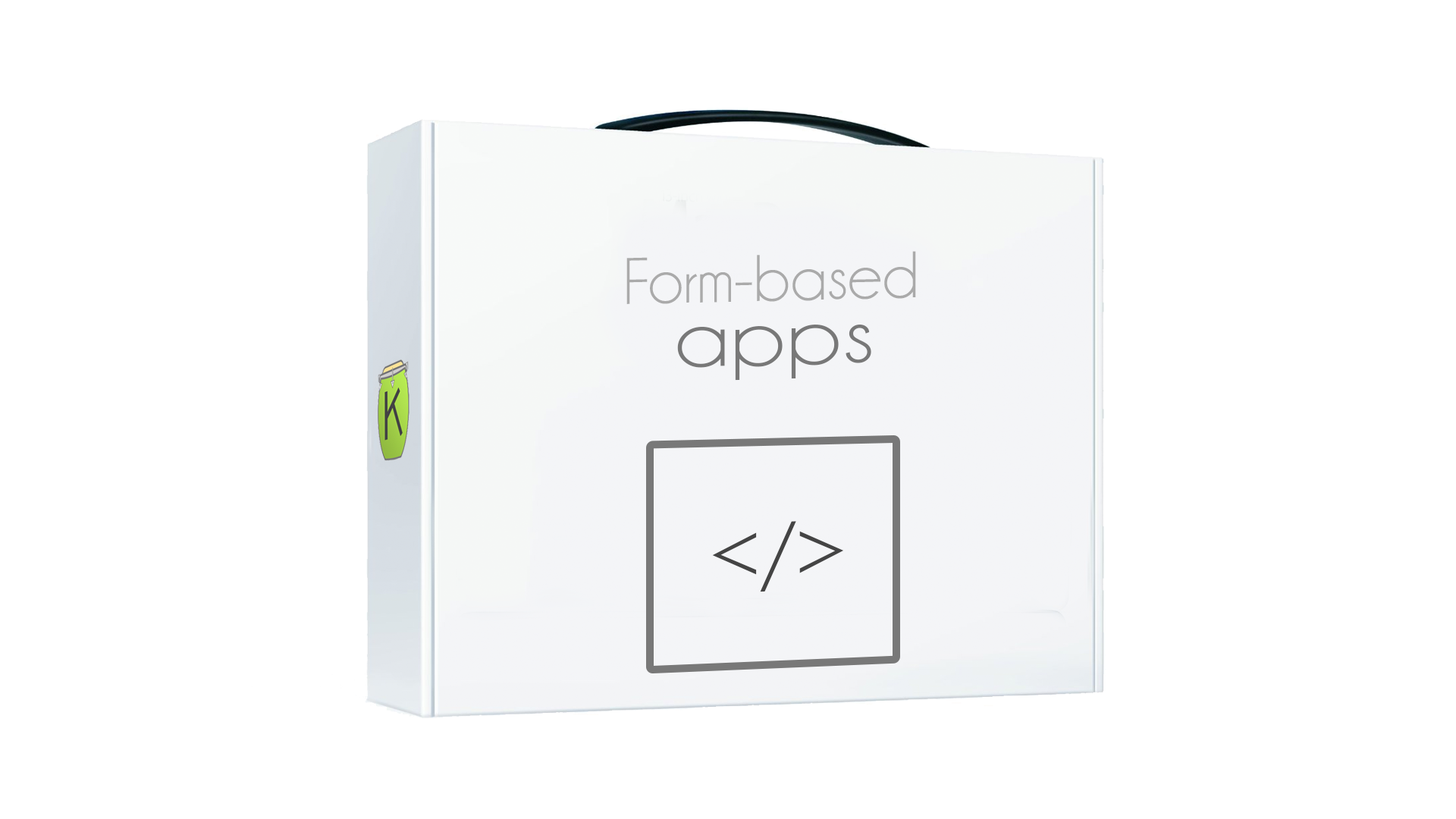
<style>
.page{position:relative;width:1456px;height:819px;background:#ffffff}
.page>*{position:absolute;margin:0}
.t1{font:66.6px "Champagne&Limousines";color:#aaaaaa}
.t2{font:85.5px "Champagne&Limousines";letter-spacing:0.02em;color:#787878;scale:1.17 1}
.t3{font:99.9px "Champagne&Limousines";letter-spacing:0.02em;color:#444444}
</style>
<div class="page">
<p class="t1" style="left:626px;top:251px;width:290px;height:53px;rotate:-1deg">Form-based</p>
<p class="t2" style="left:677px;top:325px;width:194px;height:56px;rotate:-1deg">apps</p>
<p class="t3" style="left:712px;top:521px;width:132px;height:71px;rotate:-2deg">&lt;/&gt;</p>
</div>
